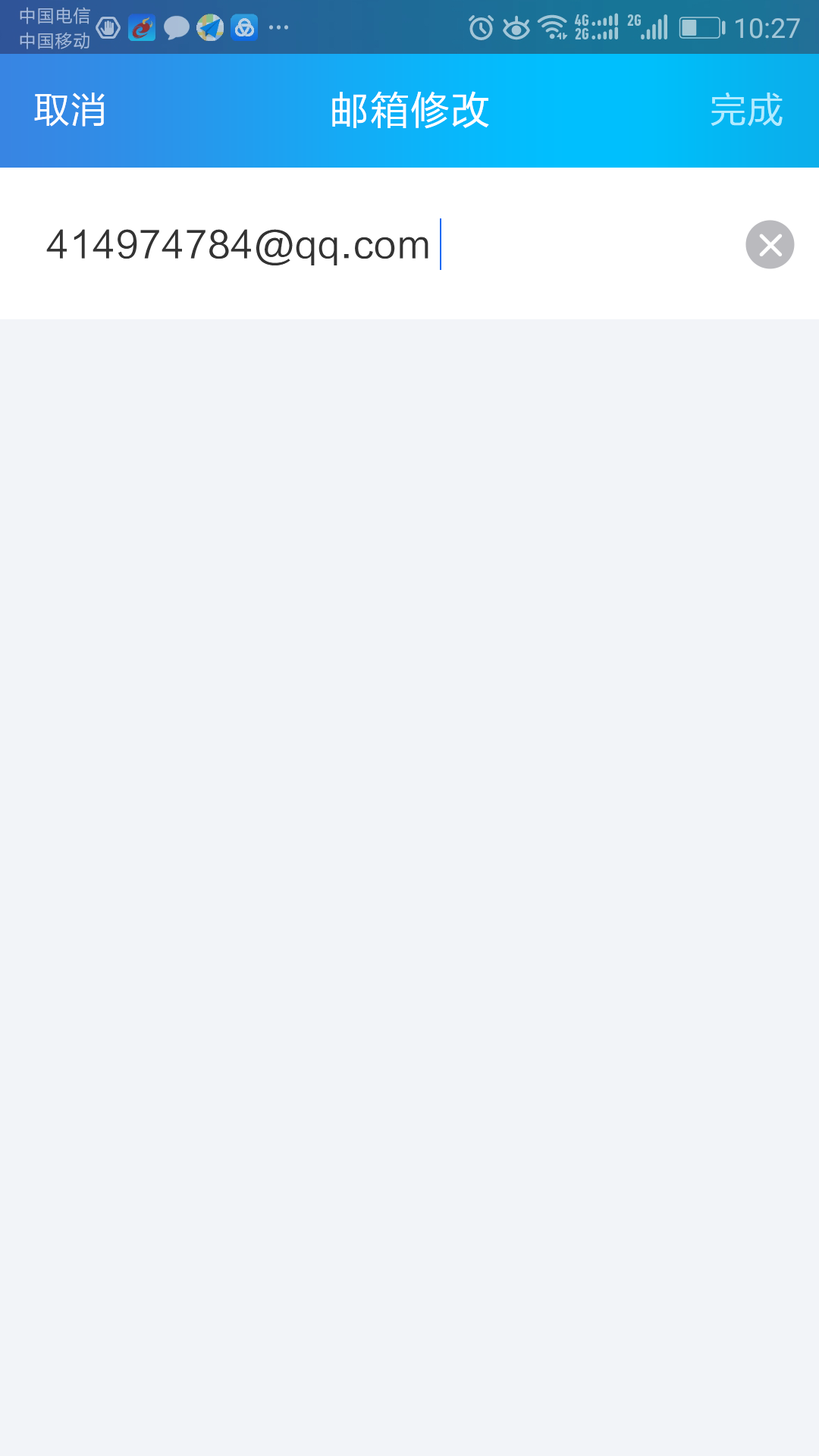
<style>
.page{position:relative;width:819px;height:1456px;background:#f2f4f8}
.page>*{position:absolute;margin:0}
.t1{font:36.4px "FZLTHK--GBK1-0";letter-spacing:0.025em;color:#ffffff}
.t2{font:39.4px "FZLTHK--GBK1-0";letter-spacing:0.025em;color:#ffffff}
.t3{font:36.4px "FZLTHK--GBK1-0";letter-spacing:0.025em;color:#b2ebff}
.t4{font:36.4px "FZLTHK--GBK1-0";letter-spacing:0.025em;color:#333333}
</style>
<div class="page">
<p class="t1" style="left:34px;top:93px;width:71px;height:34px">取消</p>
<p class="t2" style="left:332px;top:91px;width:157px;height:38px">邮箱修改</p>
<p class="t3" style="left:711px;top:92px;width:72px;height:35px">完成</p>
<p class="t4" style="left:46px;top:229px;width:382px;height:36px">414974784@qq.com</p>
</div>
